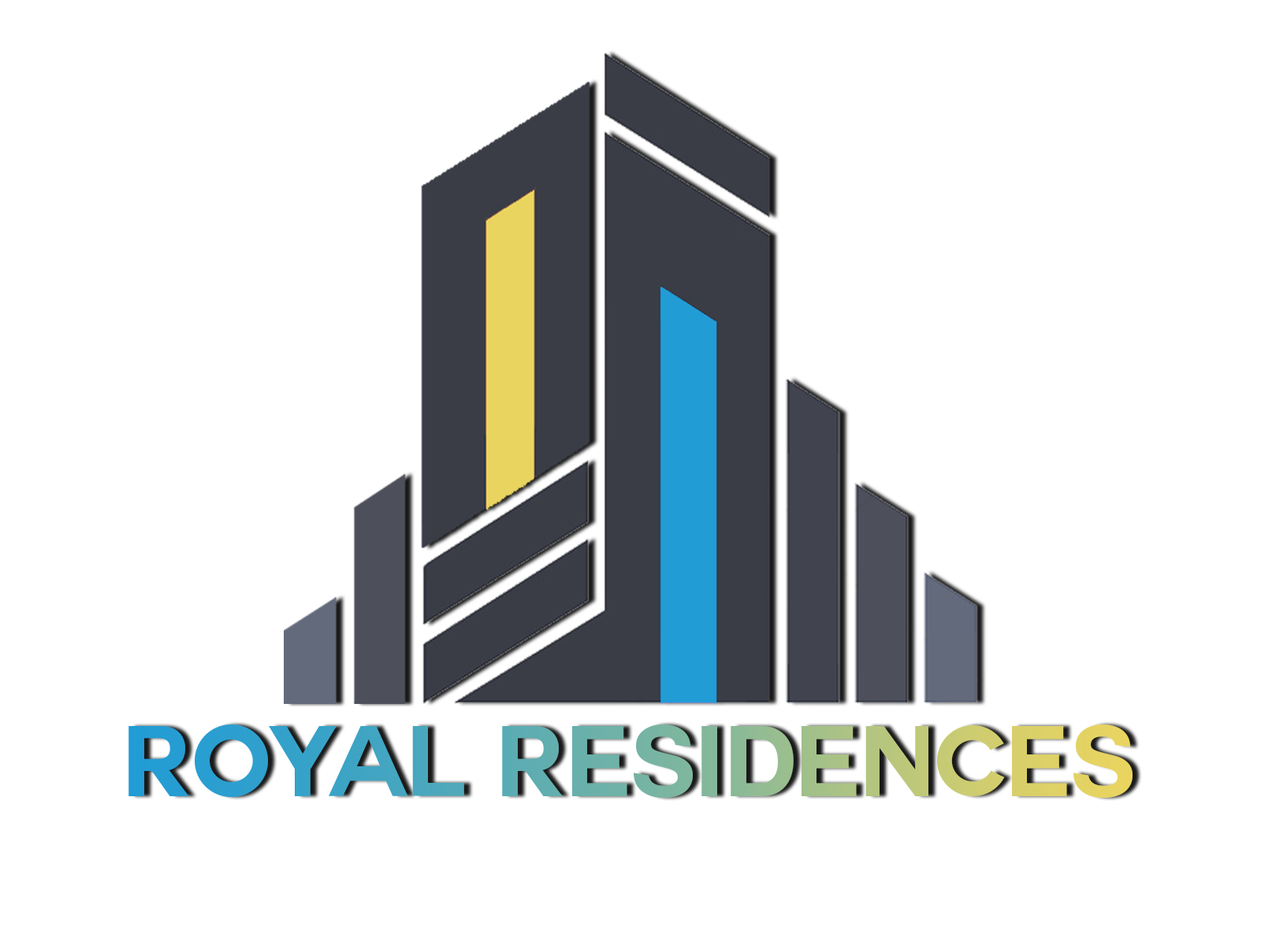
<style>
.page{position:relative;width:1261px;height:946px;background:#ffffff}
.page>*{position:absolute;margin:0}
.t1{font:98.5px "Couture-Bold"}
</style>
<div class="page">
<p class="t1" style="left:128px;top:723px;width:1004px;height:75px">ROYAL RESIDENCES</p>
</div>
